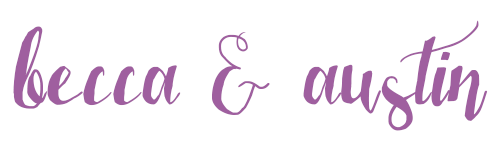
<style>
.page{position:relative;width:500px;height:167px;background:#ffffff}
.page>*{position:absolute;margin:0}
.t1{font:112.5px "LaserMetal";letter-spacing:0.025em;color:#9f5f9f}
</style>
<div class="page">
<p class="t1" style="left:13px;top:20px;width:475px;height:111px">becca &amp; austin</p>
</div>
